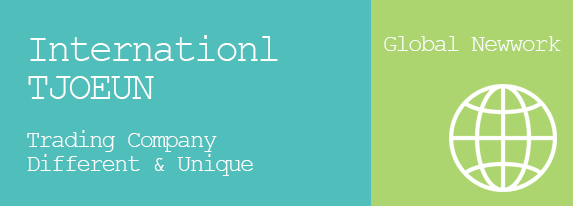
<style>
.page{position:relative;width:573px;height:206px;background:#50bfbb}
.page>*{position:absolute;margin:0}
.t1{font:24px/24px "CourierNewPSMT";letter-spacing:-0.075em;color:#ffffff}
.t2{font:40px/38px "CourierNewPSMT";letter-spacing:-0.075em;color:#ffffff}
.t3{font:24px "CourierNewPSMT";letter-spacing:-0.075em;color:#ffffff}
</style>
<div class="page">
<p class="t1" style="left:27px;top:35px;width:251px;height:141px"><span class="t2">Internationl<br>TJOEUN<br></span><br>Trading Company<br>Different &amp; Unique</p>
<p class="t3" style="left:384px;top:36px;width:177px;height:15px">Global Newwork</p>
</div>
